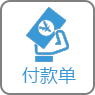
<style>
.page{position:relative;width:95px;height:95px;background:#ffffff}
.page>*{position:absolute;margin:0}
.t1{font:18px "MicrosoftYaHei";color:#3998d6}
</style>
<div class="page">
<p class="t1" style="left:22px;top:67px;width:54px;height:17px">付款单</p>
</div>
